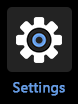
<style>
.page{position:relative;width:78px;height:104px;background:#000000}
.page>*{position:absolute;margin:0}
.t1{font:14px "SegoeUI";color:#669ce5;font-weight:bold}
</style>
<div class="page">
<p class="t1" style="left:13px;top:82px;width:52px;height:14px">Settings</p>
</div>
